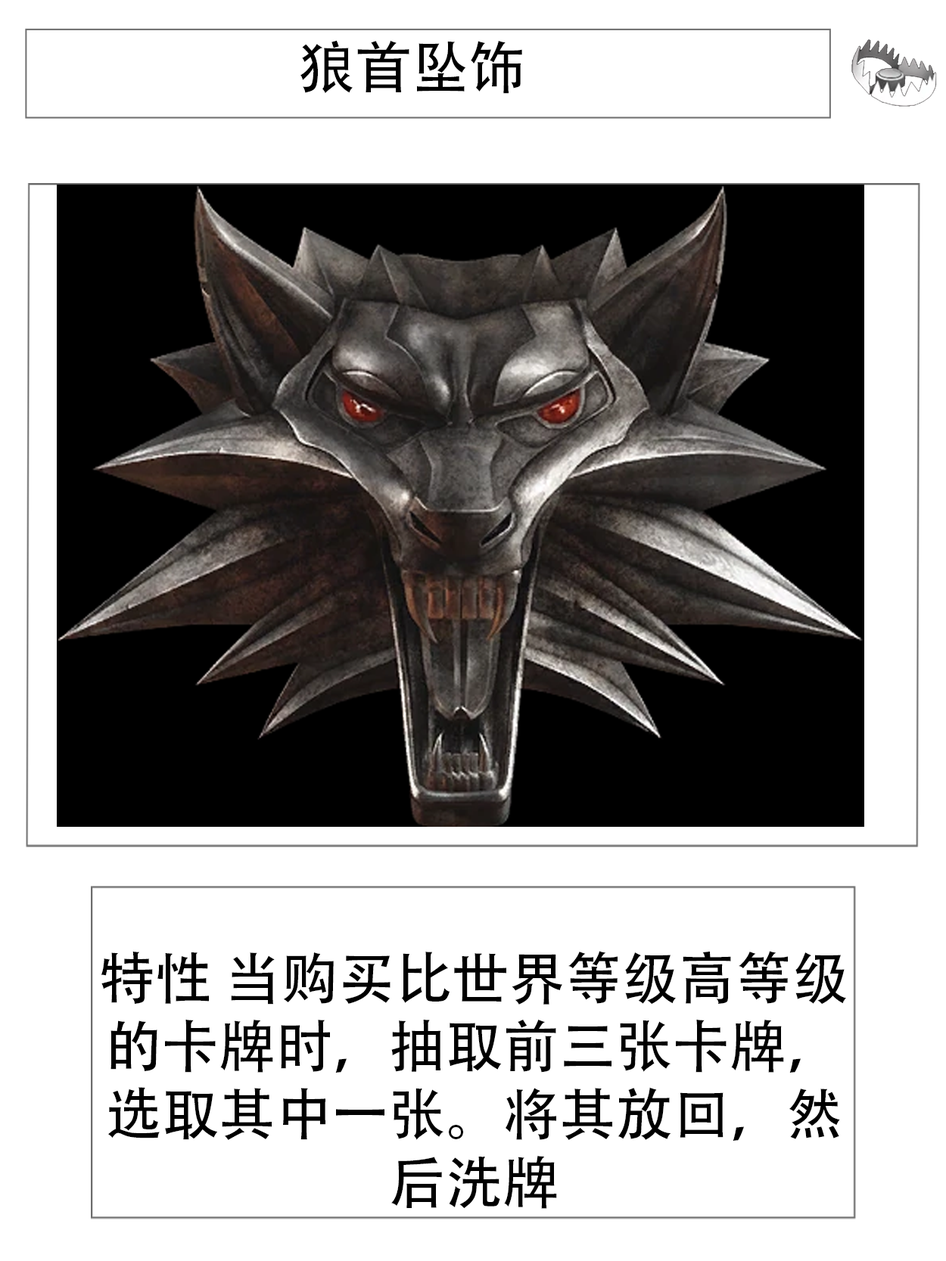
<style>
.page{position:relative;width:946px;height:1261px;background:#ffffff}
.page>*{position:absolute;margin:0}
.t1{font:56.7px "AdobeHeitiStd-Regular";color:#000000}
</style>
<div class="page">
<p class="t1" style="left:300px;top:40px;width:222px;height:54px">狼首坠饰</p>
<p class="t1" style="left:101px;top:951px;width:745px;height:258px;text-align:center">特性 当购买比世界等级高等级的卡牌时，抽取前三张卡牌，选取其中一张。将其放回，然后洗牌</p>
</div>
